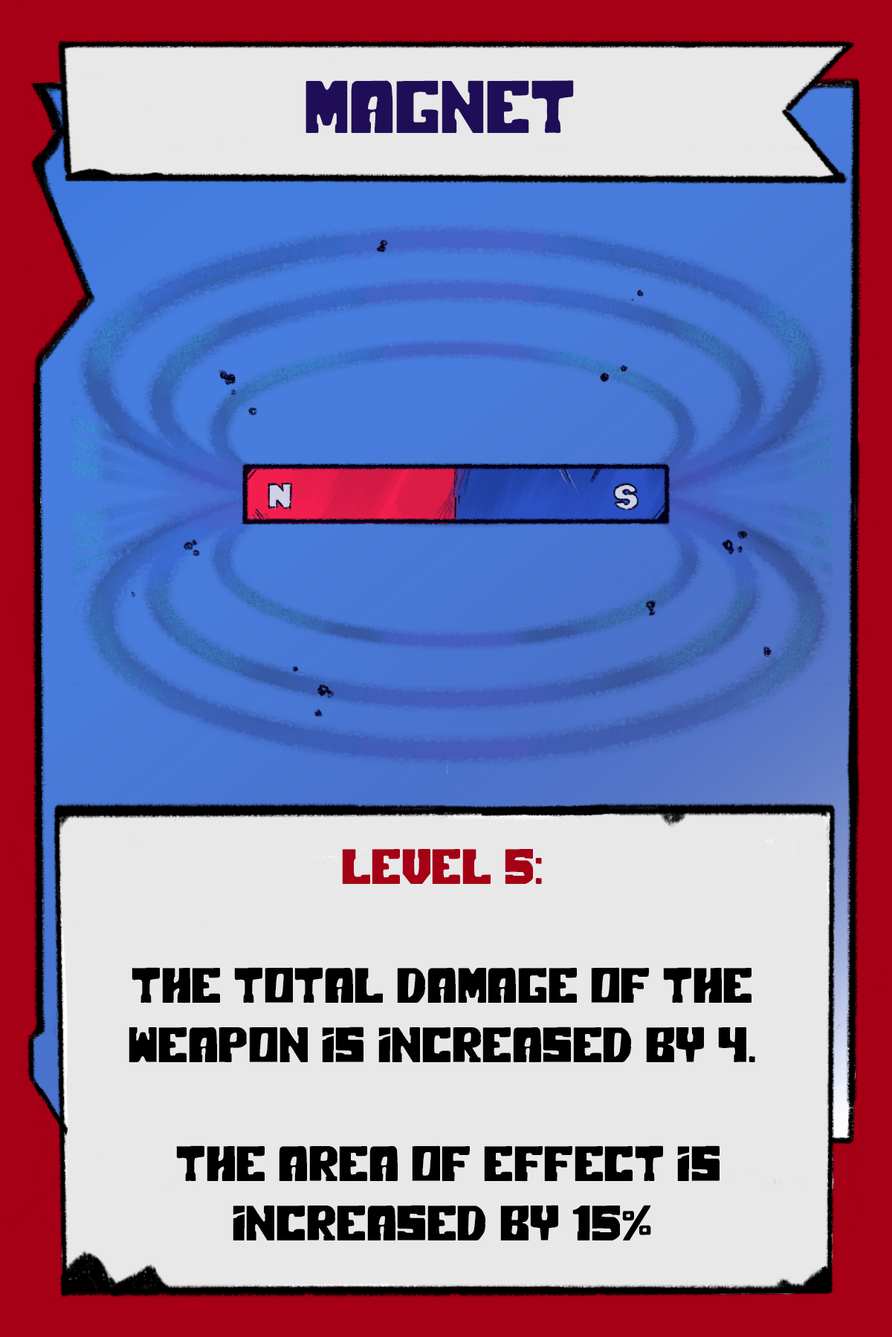
<style>
.page{position:relative;width:892px;height:1337px;background:#e8e8e8}
.page>*{position:absolute;margin:0}
.t1{font:74.3px "PolarPress";color:#1f0e57}
.t2{font:49.5px "PolarPress";color:#000000}
.t3{font:49.5px "PolarPress";color:#a50015}
</style>
<div class="page">
<p class="t1" style="left:305px;top:80px;width:269px;height:53px">MAGNET</p>
<p class="t2" style="left:129px;top:849px;width:626px;height:393px;text-align:center"><span class="t3">LEVEL 5:<br><br></span>The total damage of the weapon is increased by 4.<br><br> the Area Of Effect is increased by 15%</p>
</div>
